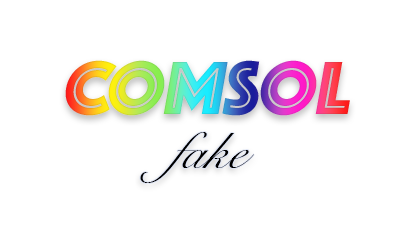
<style>
.page{position:relative;width:417px;height:229px;background:#ffffff}
.page>*{position:absolute;margin:0}
.t1{font:78.1px "Phosphate-Inline";font-style:italic}
.t2{font:51px "SnellRoundhand";color:#000000;font-style:italic}
</style>
<div class="page">
<p class="t1" style="left:65px;top:60px;width:285px;height:56px">COMSOL</p>
<p class="t2" style="left:140px;top:132px;width:114px;height:51px">fake</p>
</div>
